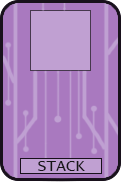
<style>
.page{position:relative;width:121px;height:182px;background:#a979bf}
.page>*{position:absolute;margin:0}
.t1{font:16px "LucidaConsole";color:#171615}
</style>
<div class="page">
<p class="t1" style="left:38px;top:161px;width:47px;height:10px">STACK</p>
</div>
